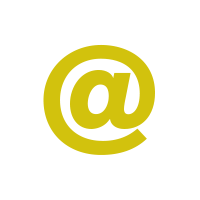
<style>
.page{position:relative;width:200px;height:200px;background:#ffffff}
.page>*{position:absolute;margin:0}
.t1{font:150px "AvenirNextLTPro-Bold";color:#d2c20d}
</style>
<div class="page">
<p class="t1" style="left:43px;top:44px;width:112px;height:111px">@</p>
</div>
